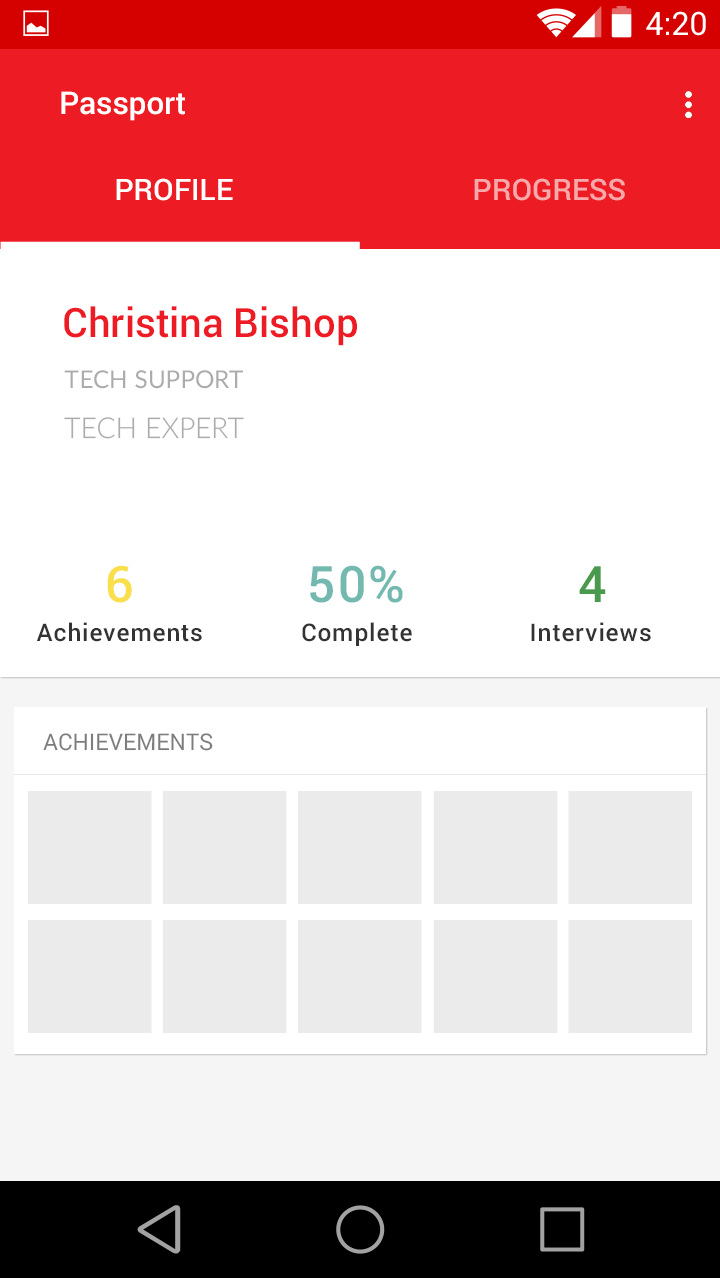
<style>
.page{position:relative;width:720px;height:1278px;background:#ffffff}
.page>*{position:absolute;margin:0}
.t1{font:32.2px "Roboto-Regular";color:#ffffff}
.t2{font:31.3px "Roboto-Medium";color:#ffffff}
.t3{font:29.5px "Roboto-Medium";color:#ffffff}
.t4{font:29.5px "Roboto-Medium";color:#f6a8aa}
.t5{font:40.4px "Roboto-Medium";color:#ed1c24}
.t6{font:24.6px "Lato-Regular";color:#acacac;text-transform:uppercase}
.t7{font:28.6px "Lato-Light";color:#acacac;text-transform:uppercase}
.t8{font:50.3px "Roboto-Medium";letter-spacing:0.04em;color:#fadf4c}
.t9{font:50.3px "Roboto-Medium";letter-spacing:0.04em;color:#73b9b0}
.t10{font:50.3px "Roboto-Medium";letter-spacing:0.04em;color:#4a9a4d}
.t11{font:24.3px "Roboto-Medium";letter-spacing:0.04em;color:#333333}
.t12{font:23.1px "Roboto-Regular";color:#7d7d7d;text-transform:uppercase}
</style>
<div class="page">
<p class="t1" style="left:646px;top:11px;width:60px;height:25px">4:20</p>
<p class="t2" style="left:61px;top:91px;width:124px;height:30px">Passport</p>
<p class="t3" style="left:116px;top:178px;width:117px;height:23px">PROFILE</p>
<p class="t4" style="left:474px;top:178px;width:151px;height:23px">PROGRESS</p>
<p class="t5" style="left:64px;top:306px;width:293px;height:40px">Christina Bishop</p>
<p class="t6" style="left:64px;top:370px;width:179px;height:19px">TECH SUPPORT</p>
<p class="t7" style="left:64px;top:417px;width:180px;height:22px">TECH EXPERT</p>
<p class="t8" style="left:107px;top:565px;width:25px;height:38px">6</p>
<p class="t9" style="left:310px;top:565px;width:93px;height:38px">50%</p>
<p class="t10" style="left:579px;top:566px;width:27px;height:36px">4</p>
<p class="t11" style="left:36px;top:622px;width:166px;height:20px">Achievements</p>
<p class="t11" style="left:302px;top:622px;width:110px;height:24px">Complete</p>
<p class="t11" style="left:531px;top:622px;width:120px;height:20px">Interviews</p>
<p class="t12" style="left:43px;top:733px;width:170px;height:18px">Achievements</p>
</div>
